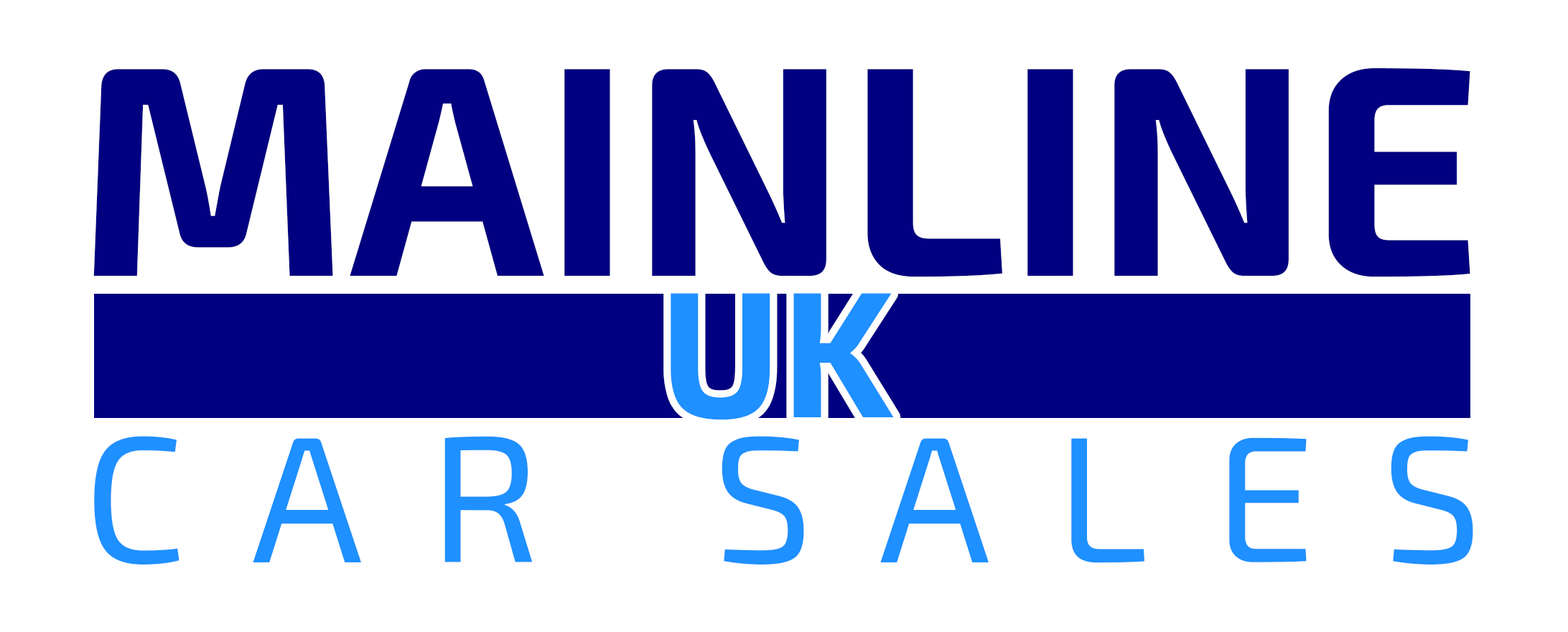
<style>
.page{position:relative;width:1568px;height:632px;background:#ffffff}
.page>*{position:absolute;margin:0}
.t1{font:299.1px "Exo2-Bold";color:#000080}
.t2{font:179.5px "Exo2-Bold";color:#1e90ff}
.t3{font:179.5px "Exo2-Regular";letter-spacing:0.368em;color:#1e90ff}
</style>
<div class="page">
<p class="t1" style="left:93px;top:68px;width:1377px;height:209px">MAINLINE</p>
<p class="t2" style="left:671px;top:293px;width:223px;height:127px">UK</p>
<p class="t3" style="left:94px;top:436px;width:1379px;height:128px">CAR SALES</p>
</div>
